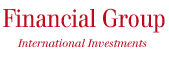
<style>
.page{position:relative;width:169px;height:68px;background:#ffffff}
.page>*{position:absolute;margin:0}
.t1{font:25.1px "Justus-Roman";letter-spacing:-0.01em;color:#bf091d;scale:0.85 1}
.t2{font:11px "Justus-Italic";letter-spacing:-0.01em;color:#bf091d}
</style>
<div class="page">
<p class="t1" style="left:3px;top:8px;width:162px;height:25px">Financial Group</p>
<p class="t2" style="left:17px;top:39px;width:130px;height:9px">International Investments</p>
</div>
